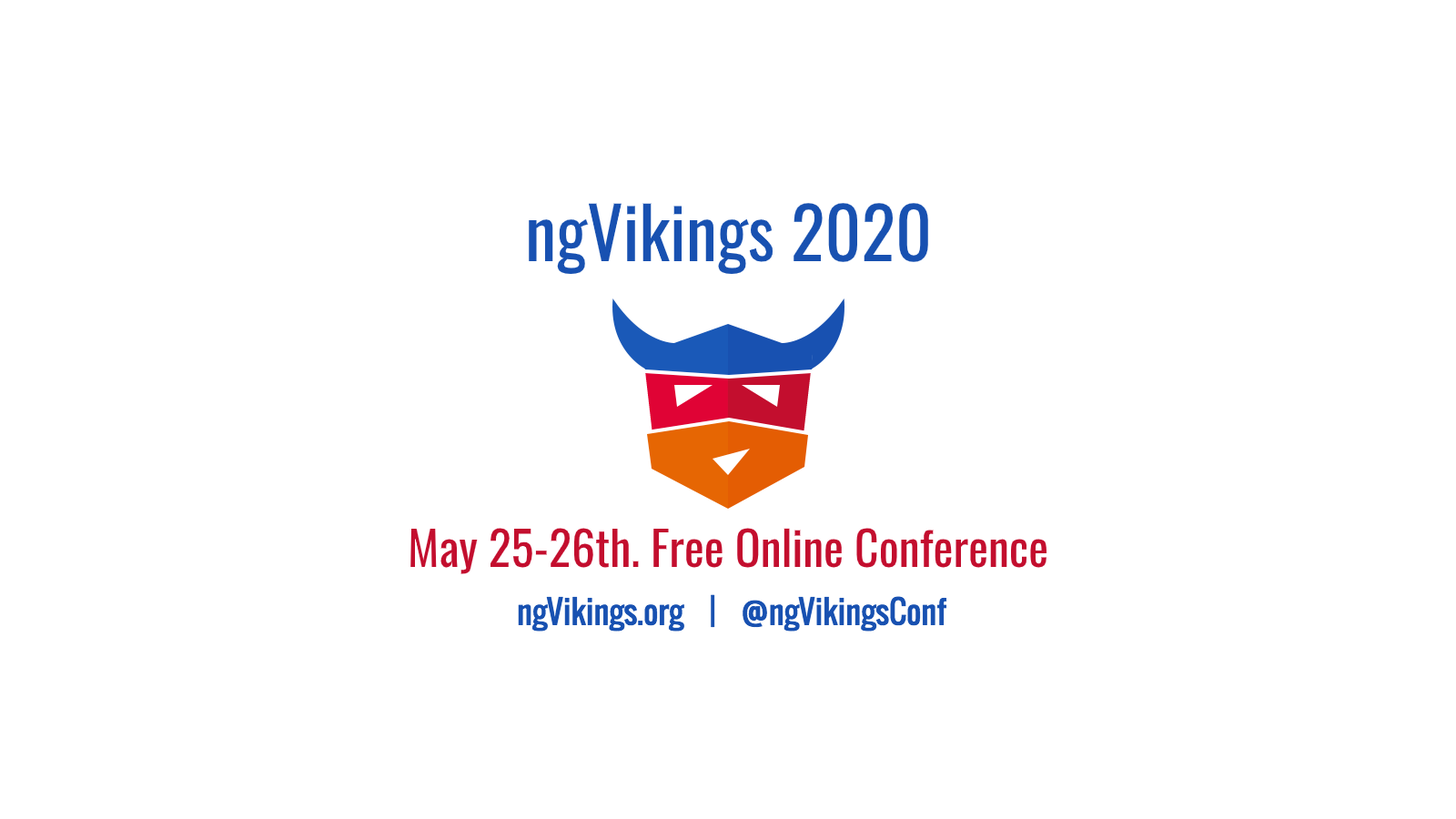
<style>
.page{position:relative;width:1456px;height:819px;background:#ffffff}
.page>*{position:absolute;margin:0}
.t1{font:71px "Oswald-Regular";color:#1851b1}
.t2{font:47.3px "Oswald-Regular";color:#c30e2e}
</style>
<div class="page">
<p class="t1" style="left:529px;top:203px;width:399px;height:71px">ngVikings 2020</p>
<p class="t2" style="left:410px;top:528px;width:636px;height:46px">May 25-26th. Free Online Conference</p>
</div>
